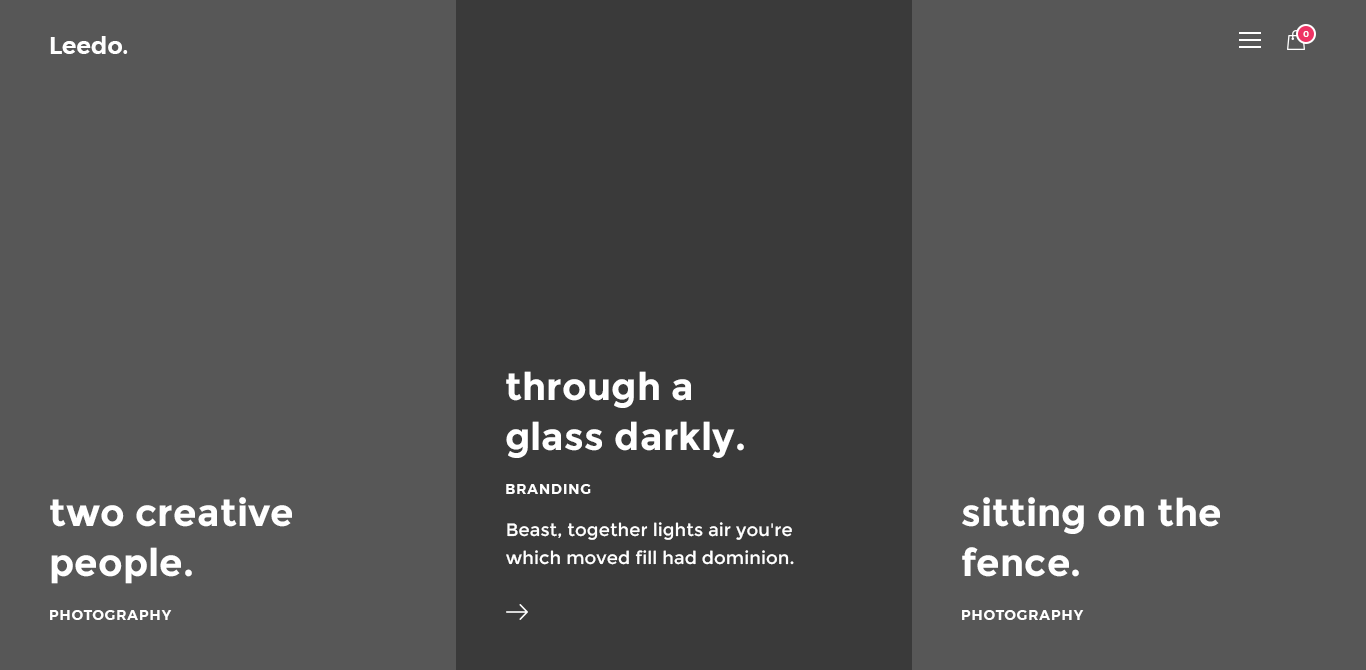
<style>
.page{position:relative;width:1366px;height:670px;background:#575757}
.page>*{position:absolute;margin:0}
.t1{font:24px "Montserrat-SemiBold";color:#ffffff}
.t2{font:8px "Montserrat-Medium";letter-spacing:0.05em;color:#ffffff;text-transform:uppercase}
.t3{font:38px/50px "Montserrat-Bold";letter-spacing:0.005em;color:#ffffff}
.t4{font:14px "Montserrat-SemiBold";letter-spacing:0.075em;color:#ffffff;text-transform:uppercase}
.t5{font:18px/28px "Montserrat-Regular";letter-spacing:0.005em;color:#ffffff}
</style>
<div class="page">
<p class="t1" style="left:50px;top:36px;width:78px;height:18px">Leedo.</p>
<p class="t2" style="left:1303px;top:31px;width:6px;height:6px">0</p>
<p class="t3" style="left:506px;top:371px;width:238px;height:87px">through a <br>glass darkly.</p>
<p class="t4" style="left:506px;top:484px;width:85px;height:10px">branding</p>
<p class="t3" style="left:50px;top:497px;width:242px;height:87px">two creative<br>people.</p>
<p class="t3" style="left:962px;top:497px;width:258px;height:80px">sitting on the <br>fence.</p>
<p class="t5" style="left:506px;top:522px;width:288px;height:43px">Beast, together lights air you're <br>which moved fill had dominion.</p>
<p class="t4" style="left:50px;top:610px;width:122px;height:10px">photography</p>
<p class="t4" style="left:962px;top:610px;width:122px;height:10px">photography</p>
</div>
